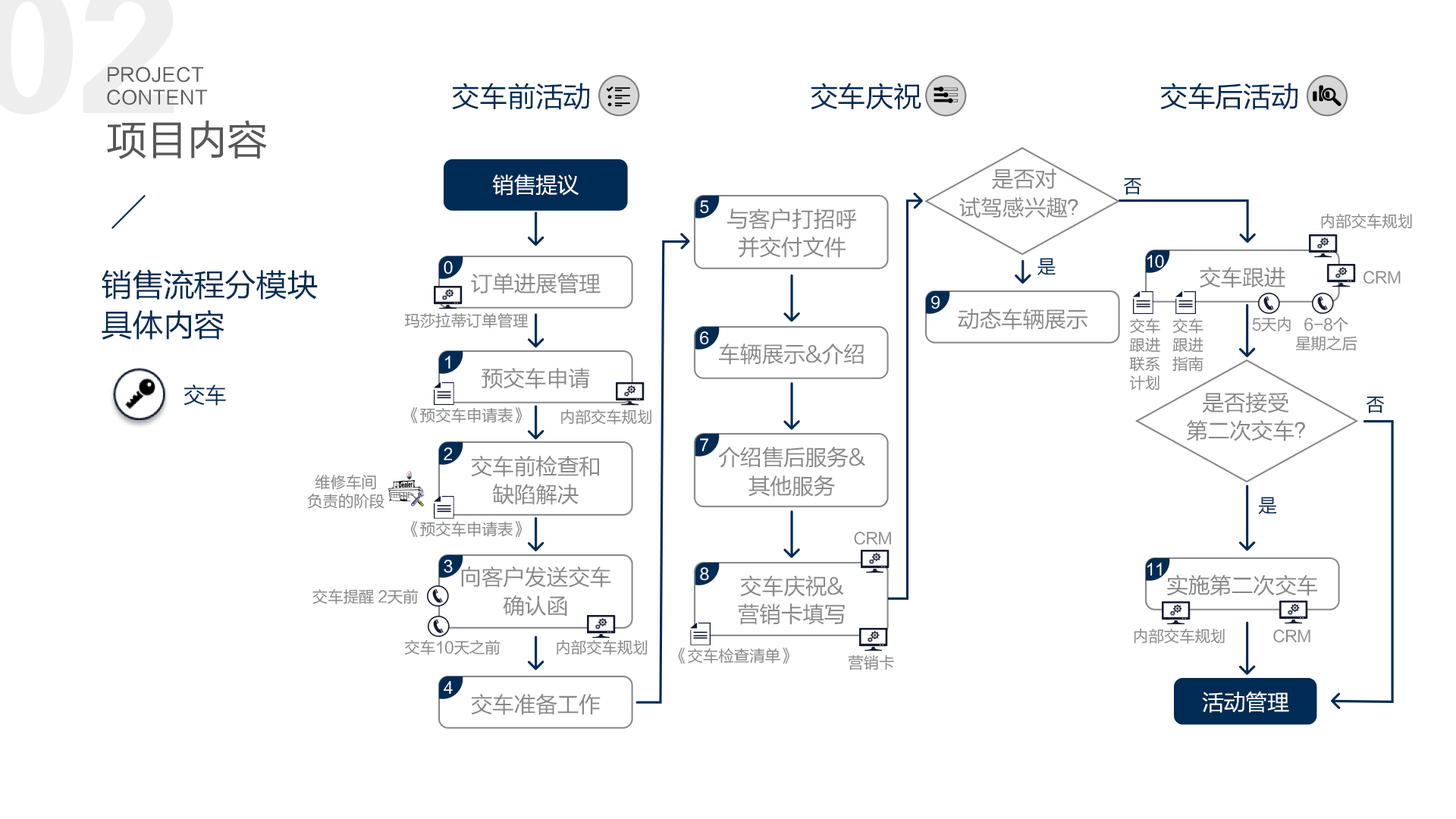
<style>
.page{position:relative;width:1456px;height:819px;background:#ffffff}
.page>*{position:absolute;margin:0}
.t1{font:18.8px "FZLTHJW--GB1-0";letter-spacing:0.02em;color:#595757}
.t2{font:28.4px "FZLTHJW--GB1-0";letter-spacing:-0.02em;color:#002c54}
.t3{font:41.1px "FZLTHJW--GB1-0";letter-spacing:-0.02em;color:#595757}
.t4{font:22.1px/28.4px "FZLTHJW--GB1-0";letter-spacing:-0.02em;color:#888888}
.t5{font:22.1px "FZLTHJW--GB1-0";letter-spacing:-0.02em;color:#ffffff}
.t6{font:19px "FZLTHJW--GB1-0";letter-spacing:-0.02em;color:#002c54}
.t7{font:15.8px "FZLTHJW--GB1-0";letter-spacing:-0.02em;color:#ffffff}
.t8{font:15.8px "FZLTHJW--GB1-0";letter-spacing:-0.02em;color:#888888}
.t9{font:31.6px/40.1px "FZLTHJW--GB1-0";letter-spacing:-0.02em;color:#002c54}
.t10{font:22.1px "FZLTHJW--GB1-0";letter-spacing:-0.02em;color:#888888}
.t11{font:15.8px/19px "FZLTHJW--GB1-0";letter-spacing:-0.02em;color:#888888}
.t12{font:22.1px "FZLTHJW--GB1-0";letter-spacing:-0.02em;color:#002c54}
</style>
<div class="page">
<p class="t1" style="left:107px;top:67px;width:101px;height:38px">PROJECT <br>CONTENT</p>
<p class="t2" style="left:452px;top:83px;width:138px;height:27px">交车前活动</p>
<p class="t2" style="left:811px;top:83px;width:110px;height:27px">交车庆祝</p>
<p class="t2" style="left:1160px;top:83px;width:138px;height:27px">交车后活动</p>
<p class="t3" style="left:107px;top:120px;width:160px;height:39px">项目内容</p>
<p class="t4" style="left:959px;top:168px;width:119px;height:50px;text-align:center">是否对<br>试驾感兴趣？</p>
<p class="t5" style="left:493px;top:174px;width:86px;height:22px">销售提议</p>
<p class="t6" style="left:1124px;top:177px;width:17px;height:18px">否</p>
<p class="t7" style="left:700px;top:200px;width:9px;height:14px">5</p>
<p class="t4" style="left:727px;top:208px;width:129px;height:50px;text-align:center">与客户打招呼<br>并交付文件</p>
<p class="t8" style="left:1321px;top:213px;width:91px;height:16px">内部交车规划</p>
<p class="t6" style="left:1037px;top:258px;width:19px;height:17px">是</p>
<p class="t7" style="left:1147px;top:255px;width:17px;height:13px">10</p>
<p class="t9" style="left:102px;top:269px;width:216px;height:71px">销售流程分模块<br>具体内容</p>
<p class="t7" style="left:444px;top:261px;width:9px;height:14px">0</p>
<p class="t10" style="left:1200px;top:267px;width:85px;height:21px">交车跟进</p>
<p class="t10" style="left:471px;top:273px;width:130px;height:21px">订单进展管理</p>
<p class="t8" style="left:1363px;top:271px;width:38px;height:13px">CRM</p>
<p class="t7" style="left:931px;top:296px;width:9px;height:13px">9</p>
<p class="t8" style="left:404px;top:312px;width:125px;height:16px">玛莎拉蒂订单管理</p>
<p class="t10" style="left:958px;top:309px;width:129px;height:21px">动态车辆展示</p>
<p class="t11" style="left:1172px;top:318px;width:31px;height:54px;text-align:center">交车<br>跟进<br>指南</p>
<p class="t8" style="left:1252px;top:316px;width:39px;height:16px">5天内</p>
<p class="t11" style="left:1295px;top:317px;width:62px;height:34px;text-align:center">6-8个<br>星期之后</p>
<p class="t11" style="left:1129px;top:318px;width:31px;height:73px;text-align:center">交车<br>跟进<br>联系<br>计划</p>
<p class="t7" style="left:700px;top:331px;width:9px;height:14px">6</p>
<p class="t10" style="left:719px;top:344px;width:145px;height:21px">车辆展示&amp;介绍</p>
<p class="t7" style="left:445px;top:356px;width:5px;height:13px">1</p>
<p class="t10" style="left:482px;top:368px;width:108px;height:21px">预交车申请</p>
<p class="t12" style="left:184px;top:384px;width:42px;height:22px">交车</p>
<p class="t4" style="left:1187px;top:392px;width:118px;height:49px;text-align:center">是否接受<br>  第二次交车？</p>
<p class="t6" style="left:1366px;top:396px;width:18px;height:17px">否</p>
<p class="t8" style="left:410px;top:407px;width:112px;height:17px">《预交车申请表》</p>
<p class="t8" style="left:561px;top:409px;width:90px;height:16px">内部交车规划</p>
<p class="t7" style="left:444px;top:447px;width:9px;height:13px">2</p>
<p class="t7" style="left:700px;top:438px;width:9px;height:13px">7</p>
<p class="t4" style="left:718px;top:447px;width:147px;height:50px;text-align:center">介绍售后服务&amp;<br>其他服务</p>
<p class="t4" style="left:471px;top:456px;width:128px;height:49px;text-align:center">交车前检查和<br>缺陷解决</p>
<p class="t11" style="left:307px;top:475px;width:77px;height:34px;text-align:center">维修车间<br>负责的阶段</p>
<p class="t6" style="left:1258px;top:497px;width:19px;height:17px">是</p>
<p class="t8" style="left:410px;top:521px;width:112px;height:17px">《预交车申请表》</p>
<p class="t8" style="left:854px;top:532px;width:37px;height:13px">CRM</p>
<p class="t7" style="left:444px;top:560px;width:9px;height:13px">3</p>
<p class="t4" style="left:461px;top:566px;width:150px;height:51px;text-align:center">向客户发送交车<br>确认函</p>
<p class="t7" style="left:700px;top:567px;width:9px;height:14px">8</p>
<p class="t7" style="left:1147px;top:563px;width:15px;height:13px">11</p>
<p class="t4" style="left:738px;top:576px;width:107px;height:49px;text-align:center">交车庆祝&amp;<br>营销卡填写</p>
<p class="t10" style="left:1167px;top:575px;width:151px;height:21px">实施第二次交车</p>
<p class="t8" style="left:312px;top:589px;width:107px;height:15px">交车提醒 2天前</p>
<p class="t8" style="left:1134px;top:628px;width:91px;height:16px">内部交车规划</p>
<p class="t8" style="left:1273px;top:629px;width:37px;height:14px">CRM</p>
<p class="t8" style="left:404px;top:639px;width:96px;height:16px">交车10天之前</p>
<p class="t8" style="left:557px;top:639px;width:91px;height:16px">内部交车规划</p>
<p class="t8" style="left:678px;top:648px;width:111px;height:16px">《交车检查清单》</p>
<p class="t8" style="left:848px;top:654px;width:46px;height:16px">营销卡</p>
<p class="t7" style="left:444px;top:681px;width:9px;height:13px">4</p>
<p class="t10" style="left:471px;top:694px;width:130px;height:21px">交车准备工作</p>
<p class="t5" style="left:1202px;top:692px;width:87px;height:21px">活动管理</p>
</div>
